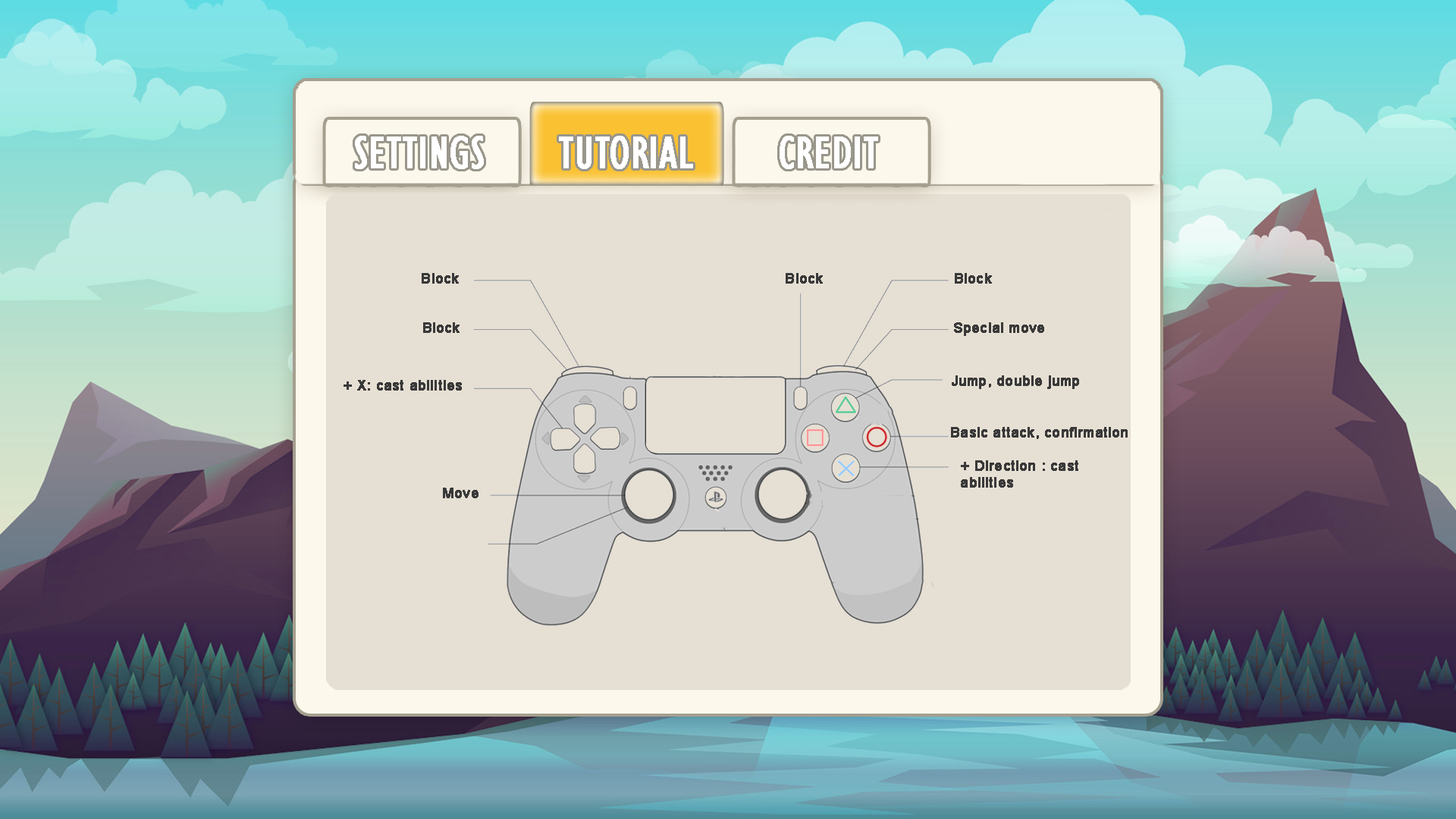
<style>
.page{position:relative;width:1456px;height:819px;background:#e6dfd3}
.page>*{position:absolute;margin:0}
.t1{font:14px "ArialMT";color:#393939;font-weight:bold}
</style>
<div class="page">
<p class="t1" style="left:422px;top:273px;width:37px;height:11px">Block</p>
<p class="t1" style="left:786px;top:273px;width:37px;height:11px">Block</p>
<p class="t1" style="left:955px;top:273px;width:37px;height:11px">Block</p>
<p class="t1" style="left:423px;top:322px;width:37px;height:11px">Block</p>
<p class="t1" style="left:954px;top:322px;width:90px;height:14px">Special move</p>
<p class="t1" style="left:952px;top:375px;width:127px;height:14px">Jump, double jump</p>
<p class="t1" style="left:344px;top:380px;width:118px;height:11px">+ X: cast abilities</p>
<p class="t1" style="left:951px;top:427px;width:177px;height:12px">Basic attack, confirmation</p>
<p class="t1" style="left:961px;top:460px;width:117px;height:28px">+ Direction : cast <br>abilities</p>
<p class="t1" style="left:443px;top:488px;width:36px;height:10px">Move</p>
</div>
